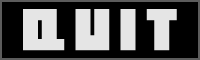
<style>
.page{position:relative;width:200px;height:60px;background:#000000}
.page>*{position:absolute;margin:0}
.t1{font:60px "Blocked";color:#000000}
</style>
<div class="page">
<p class="t1" style="left:19px;top:5px;width:162px;height:49px">quit</p>
</div>
